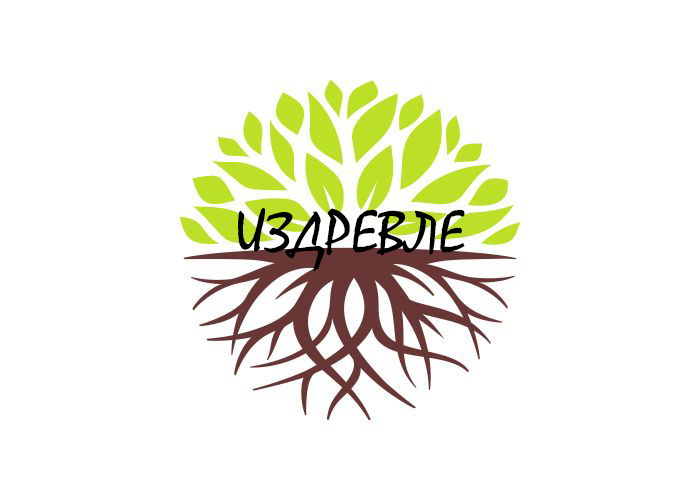
<style>
.page{position:relative;width:700px;height:500px;background:#ffffff}
.page>*{position:absolute;margin:0}
.t1{font:60px "Mistral";color:#000000}
</style>
<div class="page">
<p class="t1" style="left:238px;top:208px;width:227px;height:63px">ИЗДРЕВЛЕ</p>
</div>
